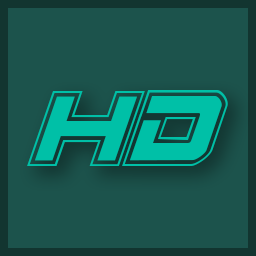
<style>
.page{position:relative;width:256px;height:256px;background:#1c534c}
.page>*{position:absolute;margin:0}
.t1{font:150px "SpaceRangerAcademyItalic";color:#00c0a7}
</style>
<div class="page">
<p class="t1" style="left:27px;top:90px;width:201px;height:76px">HD</p>
</div>
